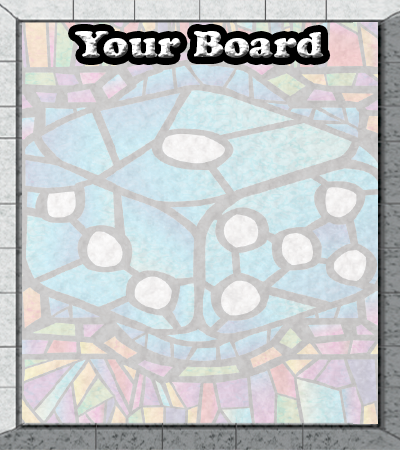
<style>
.page{position:relative;width:400px;height:450px}
.page>*{position:absolute;margin:0}
.t1{font:35.5px "CooperBlackStd";scale:1.14 1}
</style>
<div class="page">
<p class="t1" style="left:75px;top:31px;width:249px;height:27px">Your Board</p>
</div>
